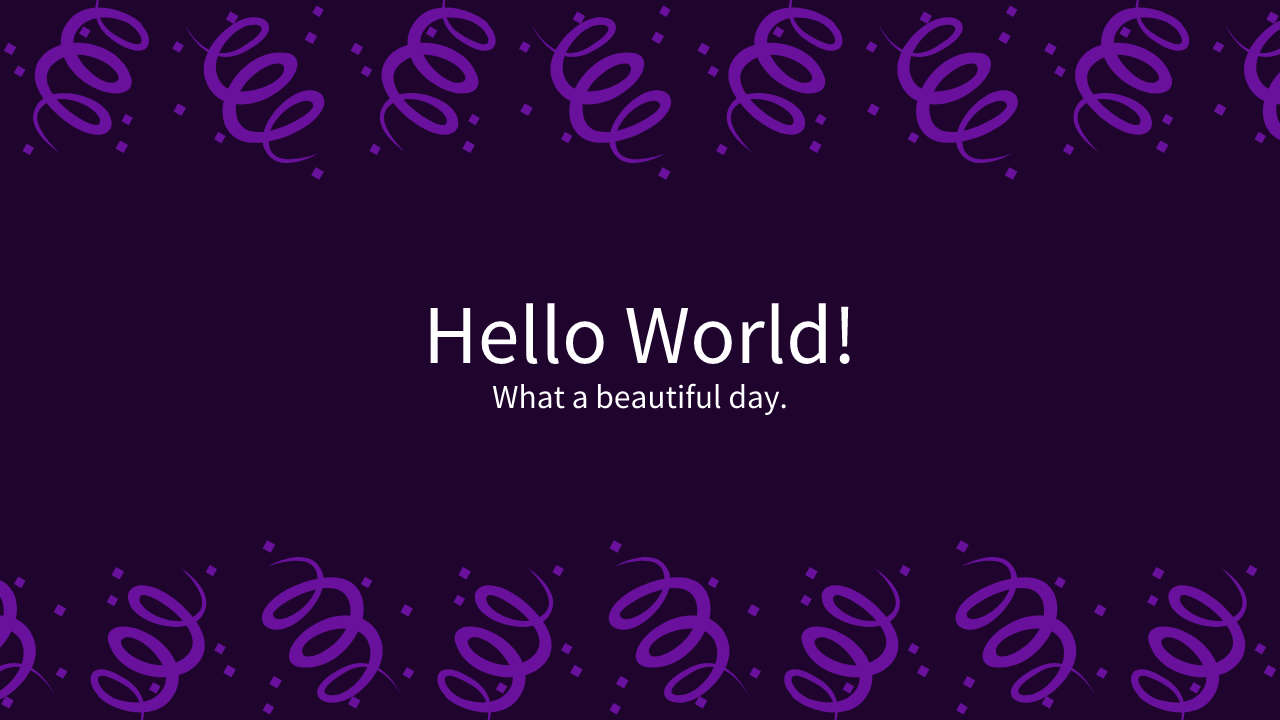
<style>
.page{position:relative;width:1280px;height:720px;background:#1f052e}
.page>*{position:absolute;margin:0}
.t1{font:75px "SourceHanSansSC-Regular";color:#ffffff}
.t2{font:30px "SourceHanSansSC-Regular";color:#ffffff}
</style>
<div class="page">
<p class="t1" style="left:430px;top:303px;width:420px;height:61px">Hello World!</p>
<p class="t2" style="left:492px;top:383px;width:294px;height:33px">What a beautiful day.</p>
</div>
